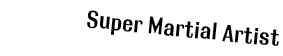
<style>
.page{position:relative;width:283px;height:56px;background:#ffffff}
.page>*{position:absolute;margin:0}
.t1{font:24px "RolloutPlain";color:#000000}
</style>
<div class="page">
<p class="t1" style="left:87px;top:10px;width:192px;height:36px;rotate:6deg">Super Martial Artist</p>
</div>
